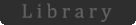
<style>
.page{position:relative;width:136px;height:25px;background:#2e2e2e}
.page>*{position:absolute;margin:0}
.t1{font:20px "Cambria";color:#606060}
</style>
<div class="page">
<p class="t1" style="left:22px;top:3px;width:90px;height:19px">L i b r a r y</p>
</div>
